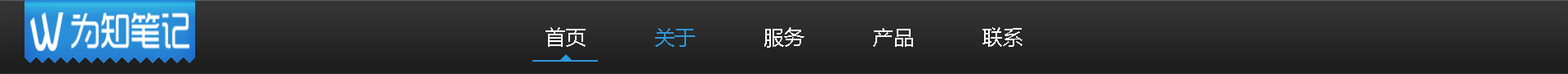
<style>
.page{position:relative;width:1568px;height:74px}
.page>*{position:absolute;margin:0}
.t1{font:20.4px "MicrosoftYaHei";color:#ffffff}
.t2{font:20.4px "MicrosoftYaHei";color:#2e97db}
</style>
<div class="page">
<p class="t1" style="left:546px;top:27px;width:476px;height:20px">首页            <span class="t2">关于</span>            服务            产品            联系</p>
</div>
